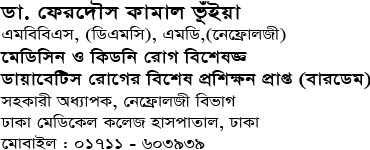
<style>
.page{position:relative;width:370px;height:150px;background:#ffffff}
.page>*{position:absolute;margin:0}
.t1{font:17.7px "SutonnyMJ";color:#000000;scale:1.2 1}
.t2{font:22.8px "SutonnyMJBold";color:#000000;scale:1.2 1}
.t3{font:19px "SutonnyMJBold";color:#000000;scale:1.2 1}
</style>
<div class="page">
<p class="t1" style="left:0px;top:0px;width:371px;height:150px"><span class="t2">Wv. †di‡`Šm Kvgvj f‚uBqv<br></span>GgweweGm, (wWGgwm), GgwW,(‡b‡d«vjRx)<br><span class="t3">‡gwWwmb I wKWwb †ivM we‡klÁ<br>Wvqv‡ewUm †iv‡Mi we‡kl cÖwkÿb cÖvß (evi‡Wg)<br></span>mnKvix Aa¨vcK, †b‡d«vjRx wefvM<br>XvKv †gwW‡Kj K‡jR nvmcvZvj, XvKv<br>‡gvevBj : 01711 - 603939</p>
</div>
